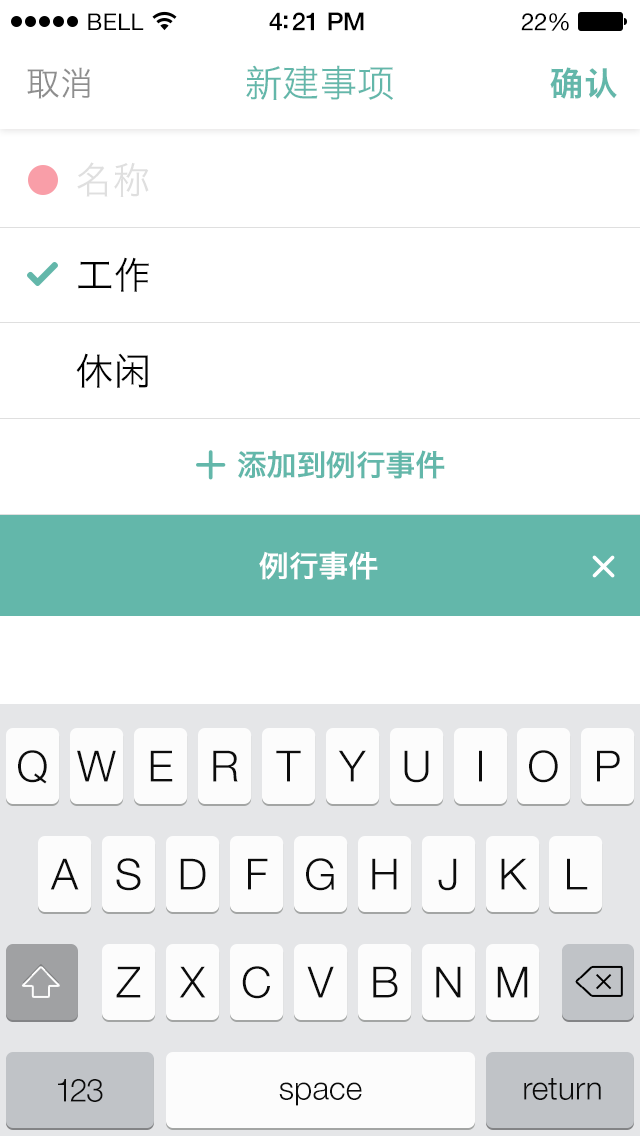
<style>
.page{position:relative;width:640px;height:1136px;background:#ffffff}
.page>*{position:absolute;margin:0}
.t1{font:23px "HelveticaNeue";letter-spacing:0.02em;color:#000000}
.t2{font:25px "HelveticaNeue-Medium";letter-spacing:-0.02em;color:#000000}
.t3{font:24px "HelveticaNeue";letter-spacing:-0.02em;color:#000000}
.t4{font:37.3px "HiraginoSansGB-W3";color:#63b7aa}
.t5{font:33.6px "HiraginoSansGB-W3";color:#8e8e8e}
.t6{font:33.6px "HiraginoSansGB-W6";color:#63b7aa}
.t7{font:37.3px "HiraginoSansGB-W3";color:#dfdfdf}
.t8{font:37.3px "HiraginoSansGB-W3";color:#000000}
.t9{font:29.9px "HiraginoSansGB-W6";color:#63b7aa}
.t10{font:29.9px "HiraginoSansGB-W6";color:#ffffff}
</style>
<div class="page">
<p class="t1" style="left:88px;top:13px;width:56px;height:17px">BELL</p>
<p class="t2" style="left:269px;top:12px;width:95px;height:19px">4:21 PM</p>
<p class="t3" style="left:521px;top:13px;width:48px;height:18px">22%</p>
<p class="t4" style="left:246px;top:65px;width:147px;height:35px">新建事项</p>
<p class="t5" style="left:27px;top:67px;width:63px;height:32px">取消</p>
<p class="t6" style="left:550px;top:67px;width:67px;height:32px">确认</p>
<p class="t7" style="left:77px;top:162px;width:72px;height:35px">名称</p>
<p class="t8" style="left:78px;top:257px;width:71px;height:35px">工作</p>
<p class="t8" style="left:76px;top:353px;width:72px;height:35px">休闲</p>
<p class="t9" style="left:237px;top:450px;width:208px;height:29px">添加到例行事件</p>
<p class="t10" style="left:259px;top:551px;width:119px;height:29px">例行事件</p>
</div>
